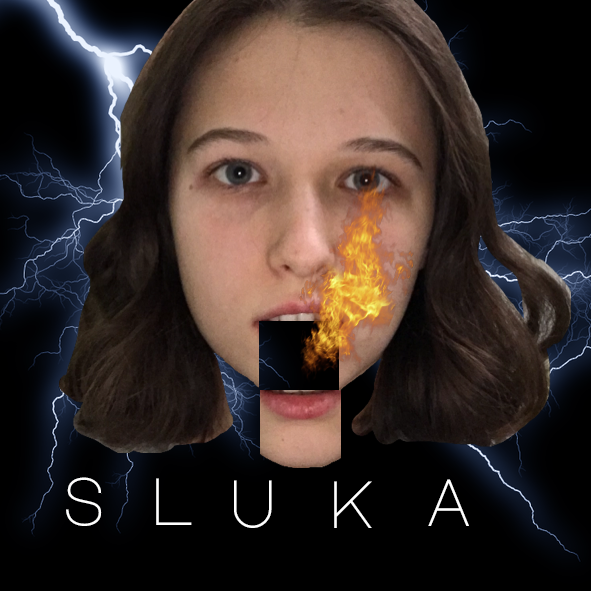
<style>
.page{position:relative;width:591px;height:591px;background:#000000}
.page>*{position:absolute;margin:0}
.t1{font:66.7px "MajorMonoDisplay-Regular";color:#ffffff}
</style>
<div class="page">
<p class="t1" style="left:66px;top:477px;width:36px;height:49px">s</p>
<p class="t1" style="left:156px;top:478px;width:36px;height:47px">l</p>
<p class="t1" style="left:234px;top:480px;width:38px;height:48px">u</p>
<p class="t1" style="left:334px;top:481px;width:38px;height:47px">k</p>
<p class="t1" style="left:428px;top:479px;width:41px;height:47px">a</p>
</div>
